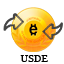
<style>
.page{position:relative;width:64px;height:64px;background:#ffffff}
.page>*{position:absolute;margin:0}
.t1{font:10px "Georgia";color:#000000}
</style>
<div class="page">
<p class="t1" style="left:20px;top:55px;width:28px;height:7px">USDE</p>
</div>
